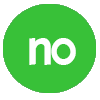
<style>
.page{position:relative;width:100px;height:100px;background:#38c138}
.page>*{position:absolute;margin:0}
.t1{font:48px "ELEGANCE";color:#ffffff}
</style>
<div class="page">
<p class="t1" style="left:29px;top:38px;width:47px;height:27px">no</p>
</div>
